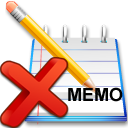
<style>
.page{position:relative;width:128px;height:128px;background:#ffffff}
.page>*{position:absolute;margin:0}
.t1{font:18px "Arial-BoldMT";color:#010101}
</style>
<div class="page">
<p class="t1" style="left:68px;top:87px;width:55px;height:15px">MEMO</p>
</div>
